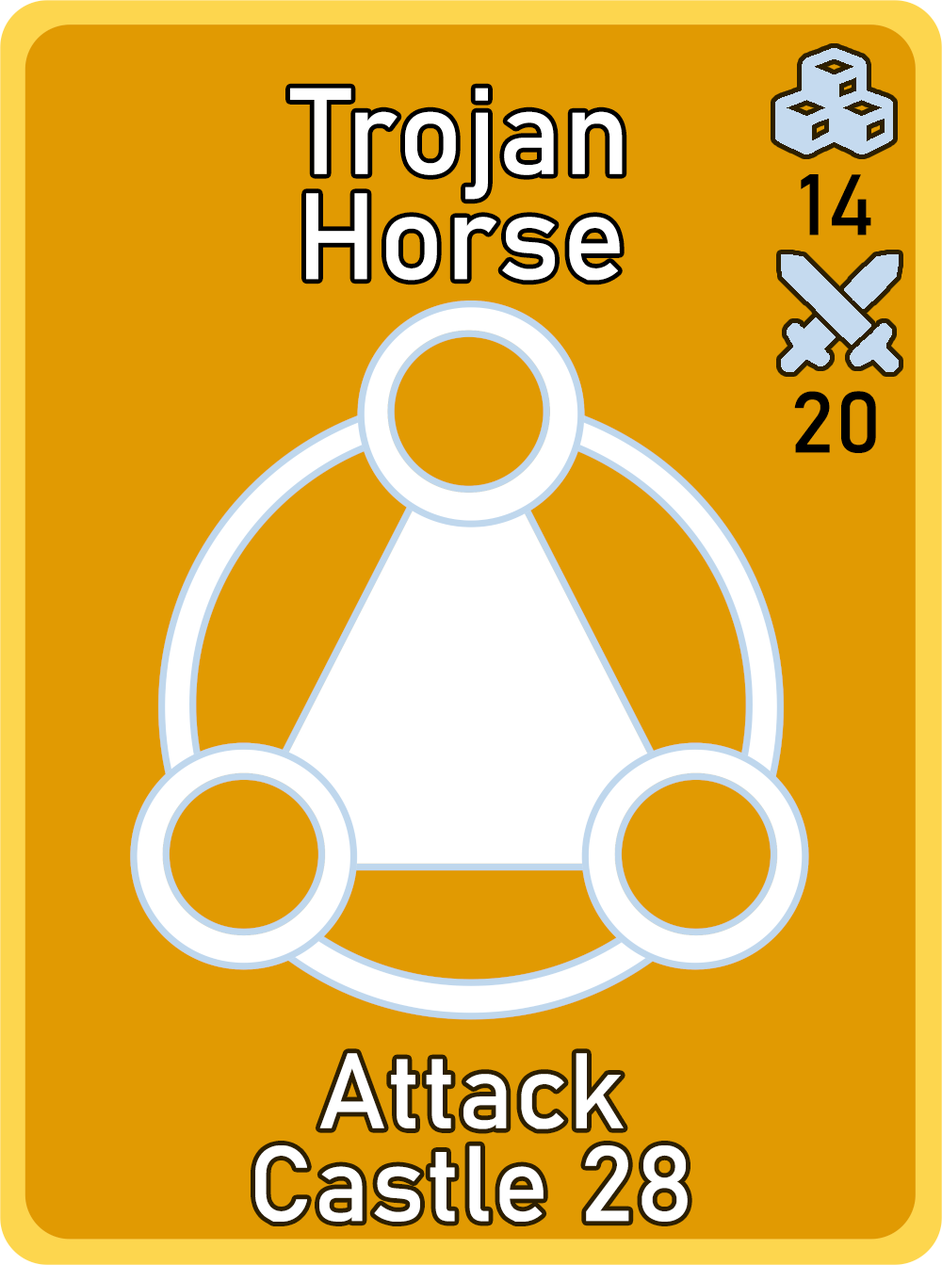
<style>
.page{position:relative;width:942px;height:1265px;background:#e19a02}
.page>*{position:absolute;margin:0}
.t1{font:120.6px/105.1px "Bahnschrift";letter-spacing:0.01em;color:#ffffff}
.t2{font:85px "Bahnschrift";letter-spacing:0.01em;color:#000000}
.t3{font:105.1px/92.7px "Bahnschrift";letter-spacing:0.01em;color:#ffffff}
</style>
<div class="page">
<p class="t1" style="left:290px;top:88px;width:333px;height:193px;text-align:center">Trojan<br>Horse</p>
<p class="t2" style="left:801px;top:174px;width:71px;height:62px">14</p>
<p class="t2" style="left:794px;top:391px;width:82px;height:62px">20</p>
<p class="t3" style="left:255px;top:1053px;width:433px;height:169px;text-align:center">Attack<br>Castle 28</p>
</div>
